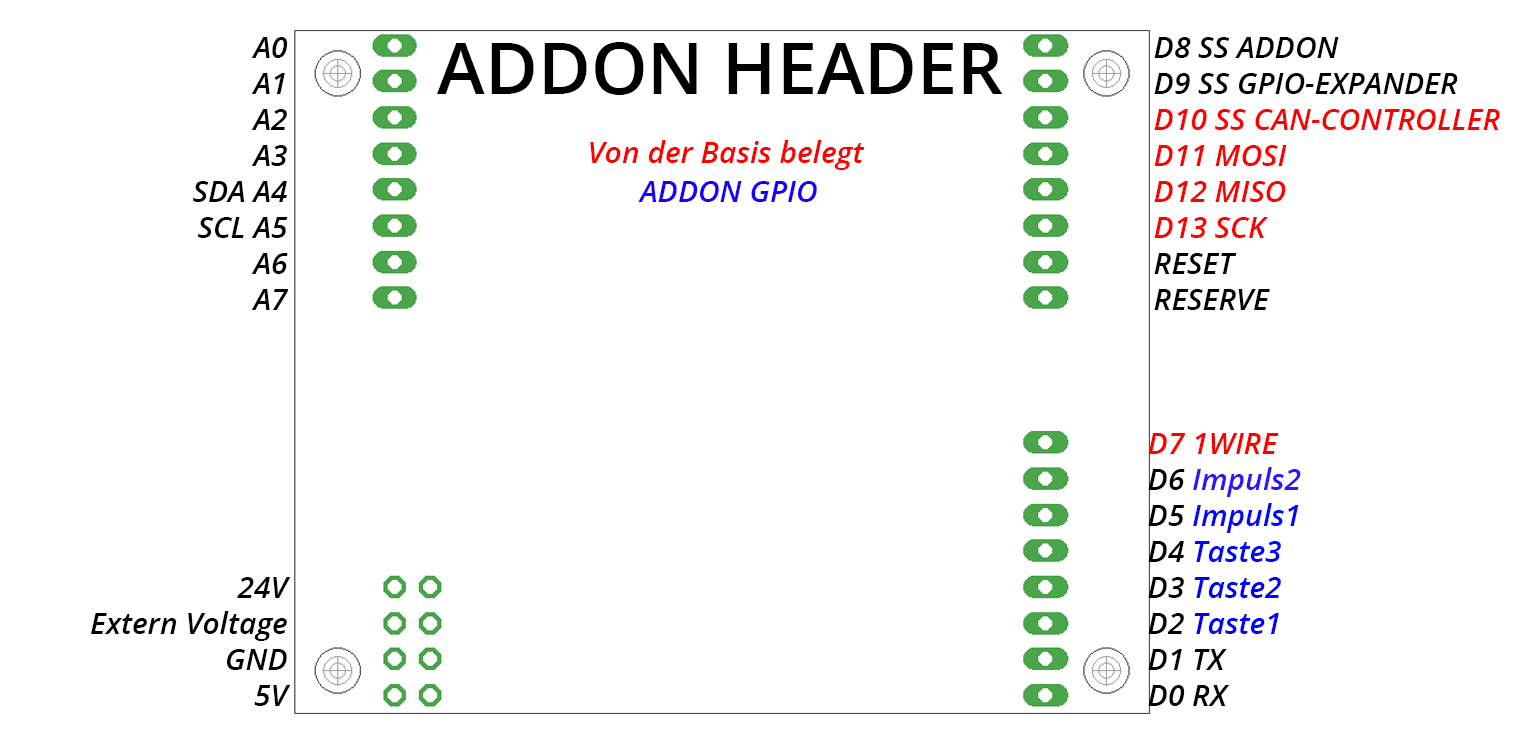
<style>
.page{position:relative;width:1538px;height:746px;background:#ffffff}
.page>*{position:absolute;margin:0}
.t1{font:30px "OpenSans-SemiboldItalic";color:#000000}
.t2{font:72px "OpenSans-Semibold";color:#000000}
.t3{font:30px "OpenSans-SemiboldItalic";color:#ff0000}
.t4{font:30px "OpenSans-SemiboldItalic";color:#1800ff}
.t5{font:30px "OpenSans-SemiboldItalic";color:#2a16ff}
.t6{font:30px "OpenSans-SemiboldItalic";color:#0006ff}
.t7{font:30px "OpenSans-SemiboldItalic";color:#0000ff}
</style>
<div class="page">
<p class="t1" style="left:251px;top:37px;width:37px;height:21px">A0</p>
<p class="t1" style="left:1154px;top:37px;width:185px;height:21px">D8 SS ADDON</p>
<p class="t2" style="left:437px;top:42px;width:566px;height:53px">ADDON HEADER</p>
<p class="t1" style="left:251px;top:73px;width:34px;height:21px">A1</p>
<p class="t1" style="left:1154px;top:73px;width:304px;height:21px">D9 SS GPIO-EXPANDER</p>
<p class="t1" style="left:251px;top:109px;width:36px;height:21px">A2</p>
<p class="t3" style="left:1154px;top:109px;width:346px;height:21px">D10 SS CAN-CONTROLLER</p>
<p class="t1" style="left:251px;top:145px;width:36px;height:21px">A3</p>
<p class="t3" style="left:590px;top:140px;width:275px;height:30px">Von der Basis belegt</p>
<p class="t3" style="left:1154px;top:145px;width:133px;height:21px">D11 MOSI</p>
<p class="t1" style="left:193px;top:181px;width:94px;height:21px">SDA A4</p>
<p class="t4" style="left:638px;top:181px;width:179px;height:21px">ADDON GPIO</p>
<p class="t3" style="left:1154px;top:181px;width:132px;height:21px">D12 MISO</p>
<p class="t1" style="left:198px;top:217px;width:90px;height:21px">SCL A5</p>
<p class="t3" style="left:1154px;top:217px;width:115px;height:21px">D13 SCK</p>
<p class="t1" style="left:251px;top:253px;width:37px;height:21px">A6</p>
<p class="t1" style="left:1154px;top:253px;width:83px;height:21px">RESET</p>
<p class="t1" style="left:251px;top:289px;width:38px;height:21px">A7</p>
<p class="t1" style="left:1154px;top:289px;width:116px;height:21px">RESERVE</p>
<p class="t3" style="left:1148px;top:433px;width:131px;height:21px">D7 1WIRE</p>
<p class="t5" style="left:1148px;top:467px;width:153px;height:30px"><span class="t1">D6 </span>Impuls2</p>
<p class="t6" style="left:1148px;top:503px;width:151px;height:30px"><span class="t1">D5 </span>Impuls1</p>
<p class="t6" style="left:1148px;top:541px;width:133px;height:21px"><span class="t1">D4 </span>Taste3</p>
<p class="t1" style="left:237px;top:577px;width:54px;height:21px">24V</p>
<p class="t7" style="left:1148px;top:577px;width:133px;height:21px"><span class="t1">D3 </span>Taste2</p>
<p class="t1" style="left:91px;top:611px;width:196px;height:30px">Extern Voltage</p>
<p class="t7" style="left:1148px;top:613px;width:131px;height:21px"><span class="t1">D2 </span>Taste1</p>
<p class="t1" style="left:227px;top:649px;width:60px;height:21px">GND</p>
<p class="t1" style="left:1148px;top:649px;width:79px;height:21px">D1 TX</p>
<p class="t1" style="left:254px;top:685px;width:37px;height:21px">5V</p>
<p class="t1" style="left:1148px;top:685px;width:82px;height:21px">D0 RX</p>
</div>
